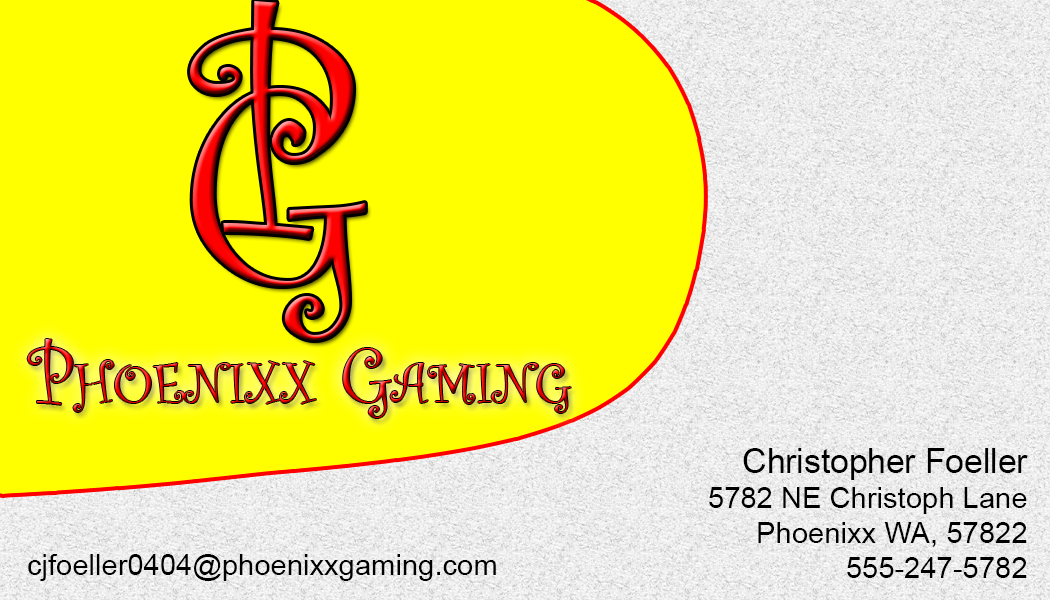
<style>
.page{position:relative;width:1050px;height:600px;background:#ffff00}
.page>*{position:absolute;margin:0}
.t1{font:300px "CurlzMT"}
.t2{font:83.3px "CurlzMT";font-variant:small-caps}
.t3{font:29.2px "ArialMT";color:#000000}
.t4{font:33.5px "ArialMT";color:#000000}
</style>
<div class="page">
<p class="t1" style="left:190px;top:0px;width:164px;height:238px">P</p>
<p class="t1" style="left:192px;top:87px;width:173px;height:253px">G</p>
<p class="t2" style="left:27px;top:339px;width:544px;height:79px">Phoenixx Gaming</p>
<p class="t3" style="left:709px;top:448px;width:319px;height:130px;text-align:right"><span class="t4">Christopher Foeller<br></span>5782 NE Christoph Lane<br>Phoenixx WA, 57822<br>555-247-5782</p>
<p class="t3" style="left:28px;top:554px;width:468px;height:27px">cjfoeller0404@phoenixxgaming.com</p>
</div>
